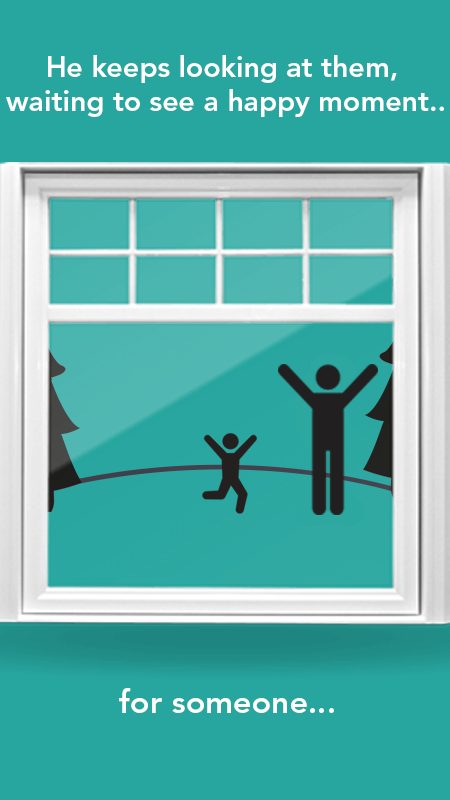
<style>
.page{position:relative;width:450px;height:800px;background:#27a69f}
.page>*{position:absolute;margin:0}
.t1{font:28.5px "AvenirLTStd-Heavy";color:#ffffff}
.t2{font:32px "AvenirLTStd-Heavy";color:#ffffff}
</style>
<div class="page">
<p class="t1" style="left:6px;top:55px;width:438px;height:62px;text-align:center">He keeps looking at them, <br>waiting to see a happy moment..</p>
<p class="t2" style="left:119px;top:688px;width:215px;height:25px">for someone...</p>
</div>
